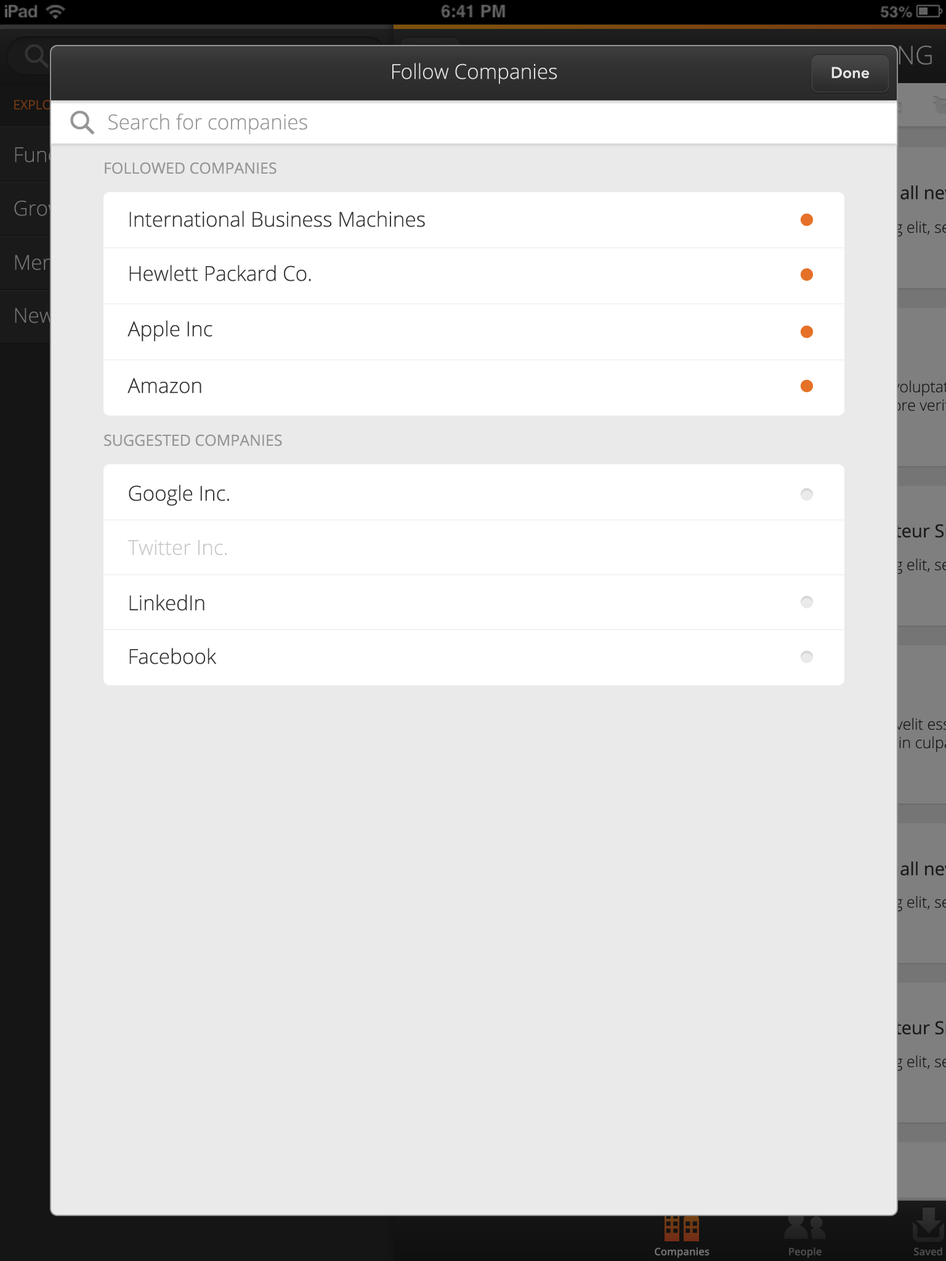
<style>
.page{position:relative;width:946px;height:1261px;background:#eaeaea}
.page>*{position:absolute;margin:0}
.t1{font:20.5px "OpenSans-Light";color:#e5e5e5}
.t2{font:15.4px "AvenirNext-DemiBold";color:#e5e5e5}
.t3{font:20.5px "OpenSans-Light";color:#969696}
.t4{font:15.4px "OpenSans";color:#969696}
.t5{font:20.5px "OpenSans-Light";color:#343434}
.t6{font:20.5px "OpenSans-Light";color:#c8c8c8}
</style>
<div class="page">
<p class="t1" style="left:392px;top:63px;width:165px;height:21px">Follow Companies</p>
<p class="t2" style="left:831px;top:66px;width:38px;height:12px">Done</p>
<p class="t3" style="left:108px;top:113px;width:199px;height:22px">Search for companies</p>
<p class="t4" style="left:105px;top:162px;width:171px;height:12px">FOLLOWED COMPANIES</p>
<p class="t5" style="left:129px;top:211px;width:296px;height:16px">International Business Machines</p>
<p class="t5" style="left:129px;top:265px;width:182px;height:16px">Hewlett Packard Co.</p>
<p class="t5" style="left:127px;top:320px;width:85px;height:22px">Apple Inc</p>
<p class="t5" style="left:127px;top:378px;width:74px;height:15px">Amazon</p>
<p class="t4" style="left:104px;top:434px;width:178px;height:12px">SUGGESTED COMPANIES</p>
<p class="t5" style="left:129px;top:485px;width:100px;height:21px">Google Inc.</p>
<p class="t6" style="left:127px;top:539px;width:100px;height:16px">Twitter Inc.</p>
<p class="t5" style="left:129px;top:594px;width:75px;height:17px">LinkedIn</p>
<p class="t5" style="left:129px;top:648px;width:88px;height:16px">Facebook</p>
</div>
